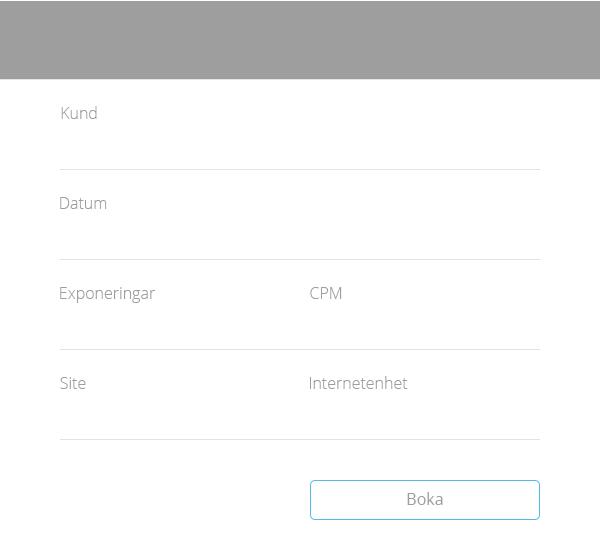
<style>
.page{position:relative;width:600px;height:540px;background:#ffffff}
.page>*{position:absolute;margin:0}
.t1{font:16px "OpenSans-Light";color:#9e9e9e}
.t2{font:16px "OpenSans";color:#9e9e9e}
</style>
<div class="page">
<p class="t1" style="left:61px;top:106px;width:36px;height:13px">Kund</p>
<p class="t1" style="left:60px;top:197px;width:47px;height:12px">Datum</p>
<p class="t1" style="left:60px;top:287px;width:95px;height:16px">Exponeringar</p>
<p class="t1" style="left:310px;top:287px;width:32px;height:12px">CPM</p>
<p class="t1" style="left:60px;top:377px;width:26px;height:12px">Site</p>
<p class="t1" style="left:310px;top:376px;width:98px;height:13px">Internetenhet</p>
<p class="t2" style="left:407px;top:492px;width:36px;height:13px">Boka</p>
</div>
